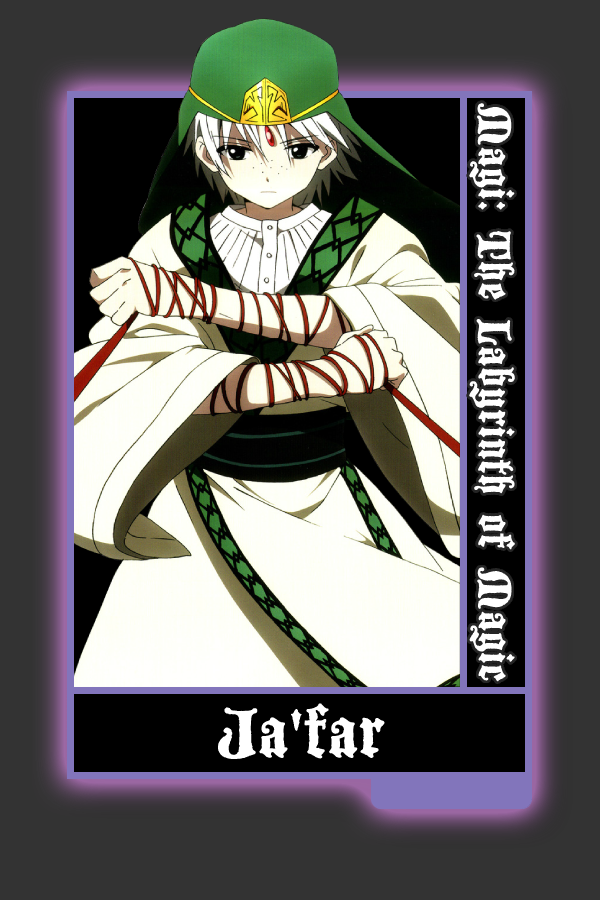
<style>
.page{position:relative;width:600px;height:900px;background:#333333}
.page>*{position:absolute;margin:0}
.t1{font:50px "BlackwoodCastle";color:#ffffff}
.t2{font:75px "BlackwoodCastle";color:#ffffff}
</style>
<div class="page">
<p class="t1" style="left:469px;top:103px;width:46px;height:579px;rotate:90deg">Magi: The Labyrinth of Magic</p>
<p class="t2" style="left:217px;top:703px;width:168px;height:57px">Ja'far</p>
</div>
